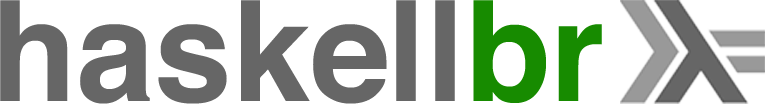
<style>
.page{position:relative;width:765px;height:104px;background:#ffffff}
.page>*{position:absolute;margin:0}
.t1{font:140.3px "Helvetica-Bold";color:#666666}
.t2{font:140.3px "Helvetica-Bold";color:#178b00}
</style>
<div class="page">
<p class="t1" style="left:0px;top:0px;width:602px;height:104px">haskell<span class="t2">br</span></p>
</div>
